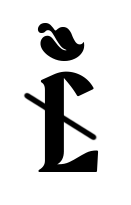
<style>
.page{position:relative;width:131px;height:205px;background:#ffffff}
.page>*{position:absolute;margin:0}
.t1{font:150px "BradleyDJR-Regular";letter-spacing:0.12em;color:#000000;text-transform:uppercase}
</style>
<div class="page">
<p class="t1" style="left:37px;top:23px;width:48px;height:38px">❧</p>
<p class="t1" style="left:38px;top:71px;width:61px;height:101px">L</p>
</div>
